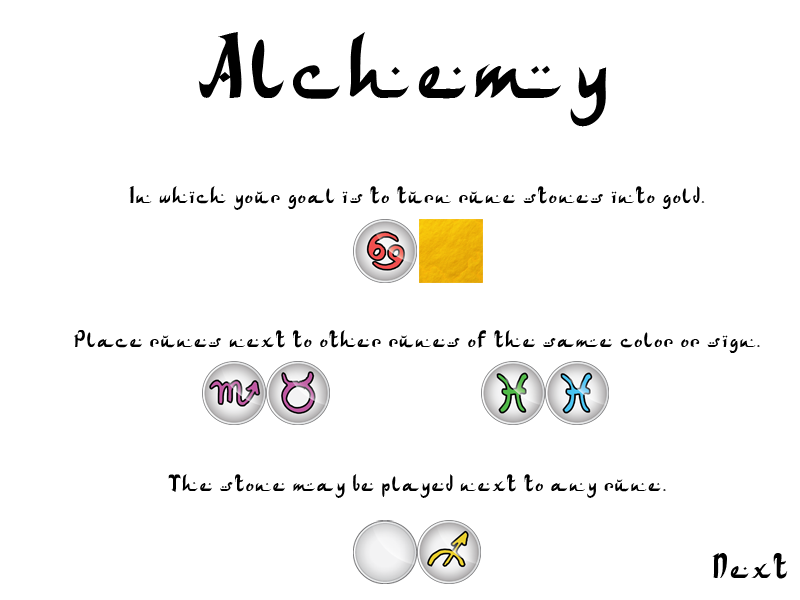
<style>
.page{position:relative;width:800px;height:600px;background:#ffffff}
.page>*{position:absolute;margin:0}
.t1{font:96px "ArabDancesMediumItalic";color:#000000}
.t2{font:24px "ArabDancesMediumItalic";color:#000000}
.t3{font:36px "ArabDancesMediumItalic";color:#000000}
</style>
<div class="page">
<p class="t1" style="left:198px;top:32px;width:409px;height:95px">Alchemy</p>
<p class="t2" style="left:74px;top:186px;width:686px;height:312px;text-align:center">In which your goal is to turn rune stones into gold.<br><br><br><br><br>Place runes next to other runes of the same color or sign.<br><br><br><br><br>The stone may be played next to any rune.</p>
<p class="t3" style="left:712px;top:553px;width:76px;height:26px">Next</p>
</div>
